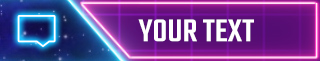
<style>
.page{position:relative;width:320px;height:61px}
.page>*{position:absolute;margin:0}
.t1{font:34.6px "Teko-Medium";color:#ffffff;text-transform:uppercase}
</style>
<div class="page">
<p class="t1" style="left:138px;top:19px;width:116px;height:23px">Your text</p>
</div>
